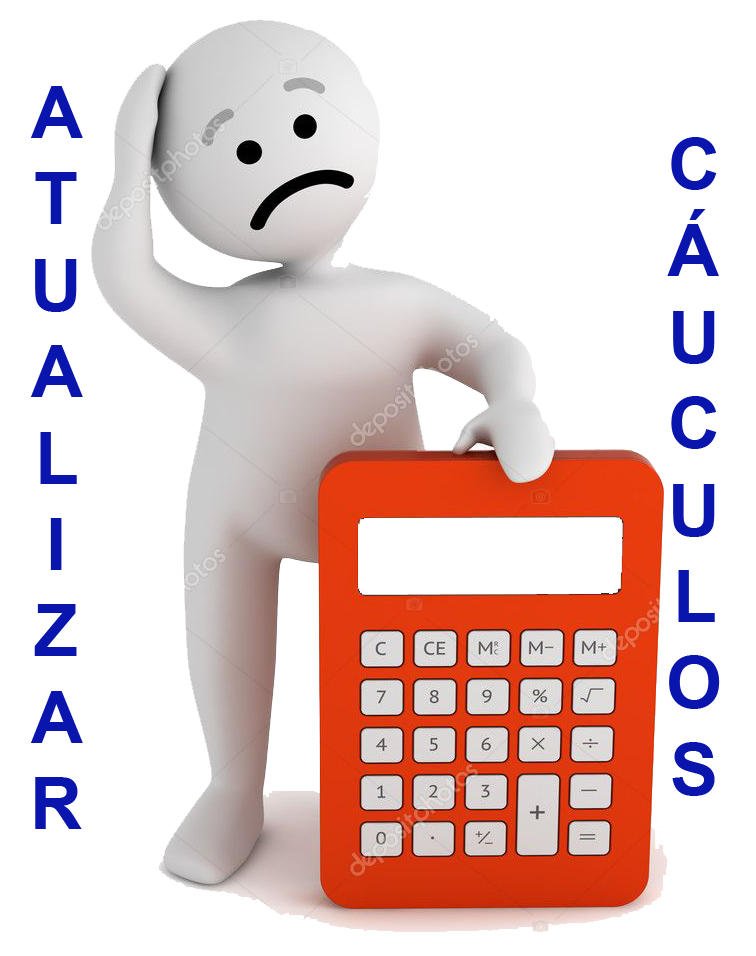
<style>
.page{position:relative;width:756px;height:956px;background:#ffffff}
.page>*{position:absolute;margin:0}
.t1{font:72px "Arial-BoldMT";color:#0a15ae}
</style>
<div class="page">
<p class="t1" style="left:31px;top:86px;width:52px;height:743px;text-align:center">A<br>T<br>U<br>A<br>L<br>I<br>Z<br>A<br>R</p>
<p class="t1" style="left:667px;top:137px;width:53px;height:659px;text-align:center">C<br>Á<br>U<br>C<br>U<br>L<br>O<br>S</p>
</div>
